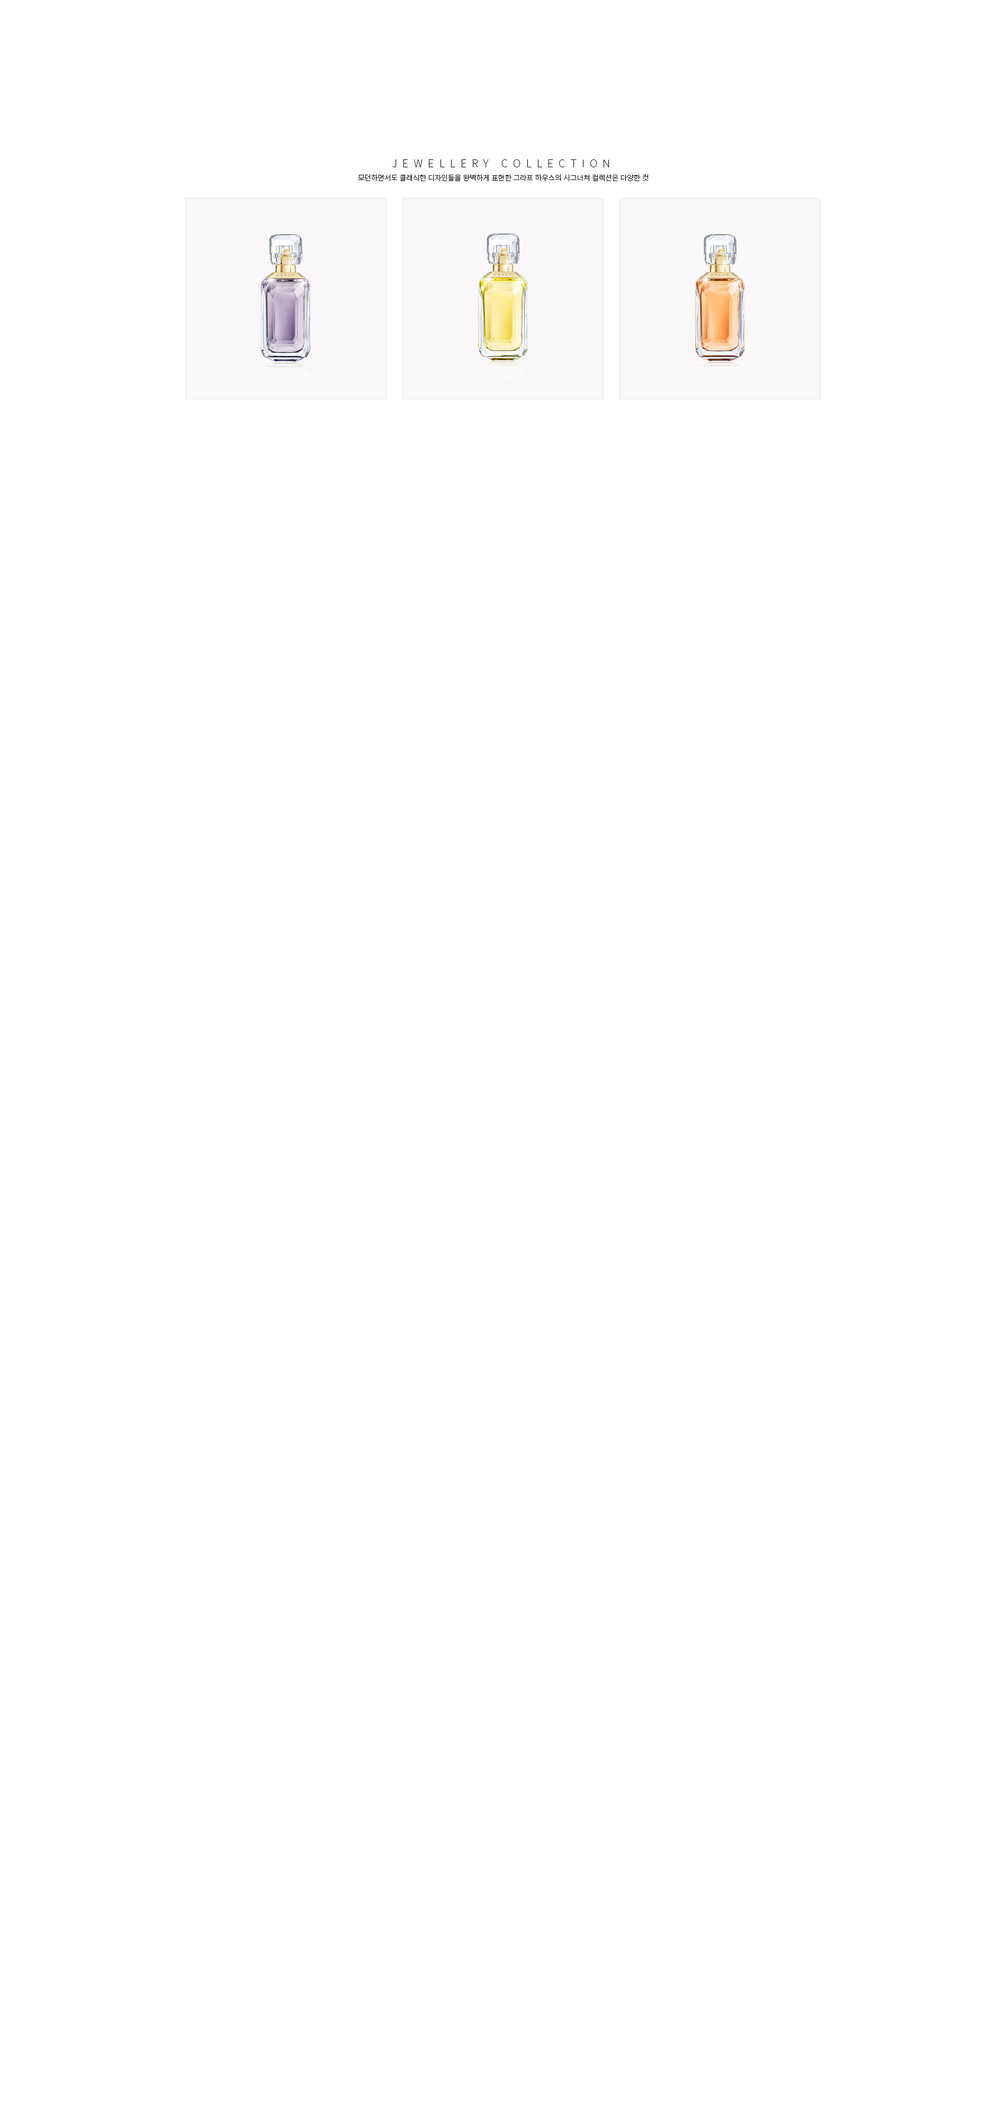
<style>
.page{position:relative;width:1006px;height:2118px;background:#ffffff}
.page>*{position:absolute;margin:0}
.t1{font:10.6px "NotoSansKR-Thin";letter-spacing:0.5em;color:#000000}
.t2{font:7.4px "NotoSansKR-Light";letter-spacing:-0.025em;color:#000000}
</style>
<div class="page">
<p class="t1" style="left:392px;top:159px;width:217px;height:8px">JEWELLERY COLLECTION</p>
<p class="t2" style="left:358px;top:174px;width:291px;height:8px">모던하면서도 클래식한 디자인들을 완벽하게 표현한 그라프 하우스의 시그너쳐 컬렉션은 다양한 컷</p>
</div>
